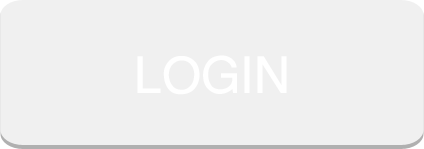
<style>
.page{position:relative;width:424px;height:149px;background:#f0f0f0}
.page>*{position:absolute;margin:0}
.t1{font:50px "Helvetica-Normal";color:#ffffff}
</style>
<div class="page">
<p class="t1" style="left:137px;top:55px;width:150px;height:40px">LOGIN</p>
</div>
